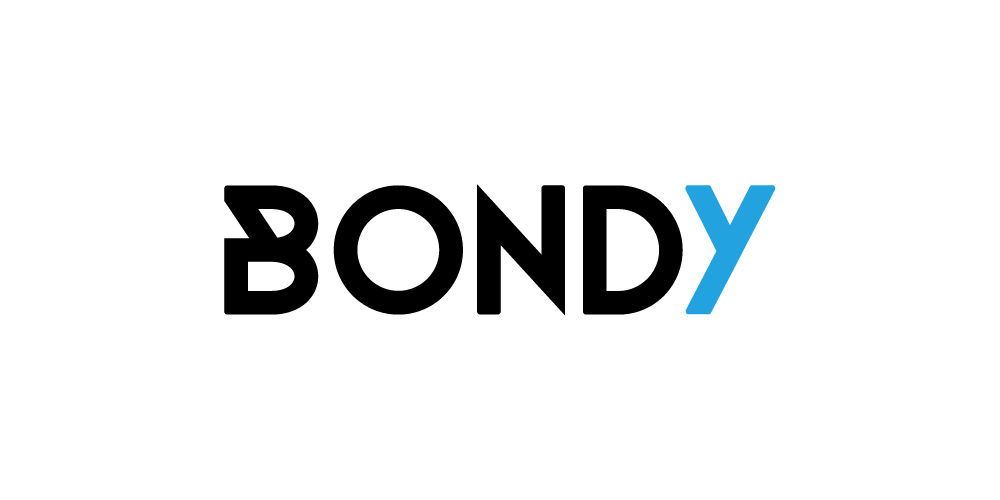
<style>
.page{position:relative;width:1000px;height:500px;background:#ffffff}
.page>*{position:absolute;margin:0}
.t1{font:150px "FARRAY-Regular";color:#000000}
.t2{font:150px "FARRAY-Regular";color:#22a3df}
</style>
<div class="page">
<p class="t1" style="left:224px;top:184px;width:552px;height:132px">Bond<span class="t2">y</span></p>
</div>
